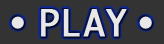
<style>
.page{position:relative;width:164px;height:44px;background:#333333}
.page>*{position:absolute;margin:0}
.t1{font:36px "Ayuthaya";color:#ffffff;font-weight:bold}
</style>
<div class="page">
<p class="t1" style="left:41px;top:9px;width:86px;height:28px">PLAY</p>
</div>
